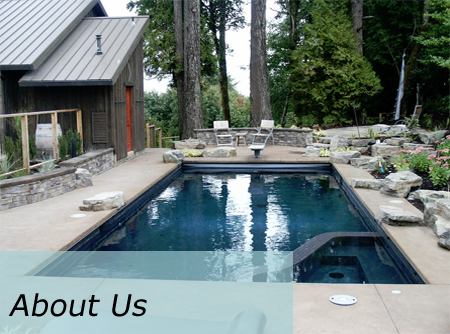
<style>
.page{position:relative;width:450px;height:334px}
.page>*{position:absolute;margin:0}
.t1{font:30px "Verdana";color:#000000;font-style:italic}
</style>
<div class="page">
<p class="t1" style="left:8px;top:293px;width:139px;height:24px">About Us</p>
</div>
